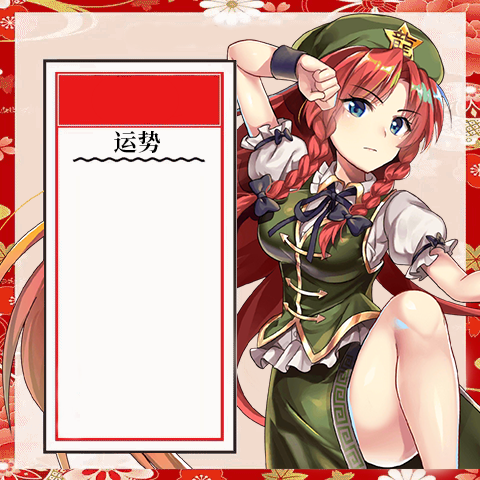
<style>
.page{position:relative;width:480px;height:480px;background:#fcfaf9}
.page>*{position:absolute;margin:0}
.t1{font:24px "NotoSerifSC-Bold";color:#000000}
</style>
<div class="page">
<p class="t1" style="left:114px;top:130px;width:46px;height:23px">运势</p>
</div>
